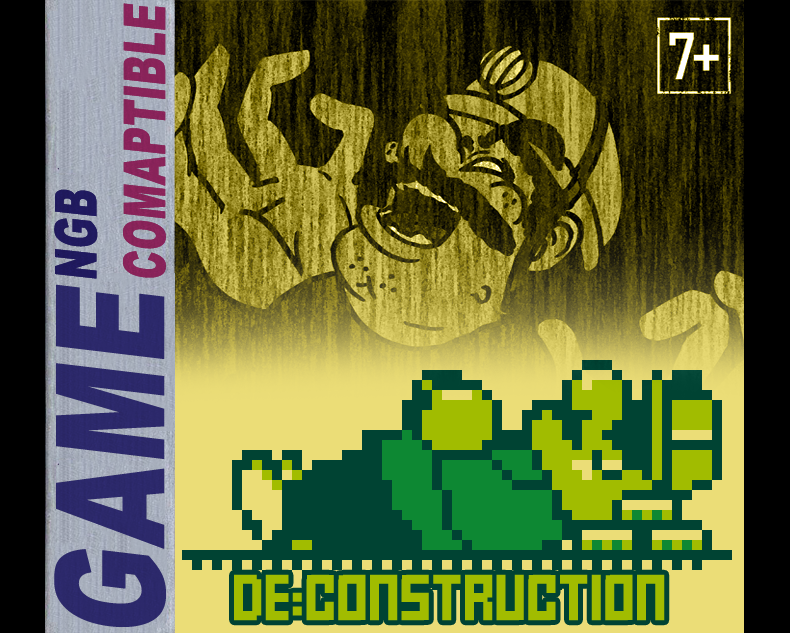
<style>
.page{position:relative;width:790px;height:633px}
.page>*{position:absolute;margin:0}
.t1{font:57.1px "Arial-Black";letter-spacing:0.005em;color:#9a2257;font-weight:bold;font-style:italic;scale:0.63 1}
.t2{font:57.1px "Arial-Black";letter-spacing:0.005em;color:#20195d;font-weight:bold;font-style:italic;scale:0.63 1}
.t3{font:150.2px "Arial-Black";letter-spacing:0.005em;color:#2c276a;font-weight:bold;font-style:italic;scale:0.68 1}
.t4{font:36px "FFFForward";letter-spacing:0.005em;color:#a1bc00}
</style>
<div class="page">
<p class="t1" style="left:54px;top:3px;width:112px;height:276px;rotate:-90deg"><span class="t2">NGB<br></span>COMAPTIBLE</p>
<p class="t1" style="left:54px;top:3px;width:112px;height:276px;rotate:-90deg;opacity:0.82"><span class="t2">NGB<br></span>COMAPTIBLE</p>
<p class="t1" style="left:54px;top:3px;width:112px;height:276px;rotate:-90deg"><span class="t2">NGB<br></span>COMAPTIBLE</p>
<p class="t1" style="left:54px;top:3px;width:112px;height:276px;rotate:-90deg;opacity:0.82"><span class="t2">NGB<br></span>COMAPTIBLE</p>
<p class="t3" style="left:54px;top:284px;width:112px;height:343px;rotate:-90deg">GAME</p>
<p class="t3" style="left:54px;top:284px;width:112px;height:343px;rotate:-90deg">GAME</p>
<p class="t4" style="left:234px;top:574px;width:431px;height:47px">DE:CONSTRUCTION</p>
</div>
